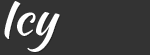
<style>
.page{position:relative;width:150px;height:55px;background:#333333}
.page>*{position:absolute;margin:0}
.t1{font:48px "KaushanScript-Regular";color:#ffffff}
</style>
<div class="page">
<p class="t1" style="left:4px;top:1px;width:56px;height:51px">Icy</p>
</div>
